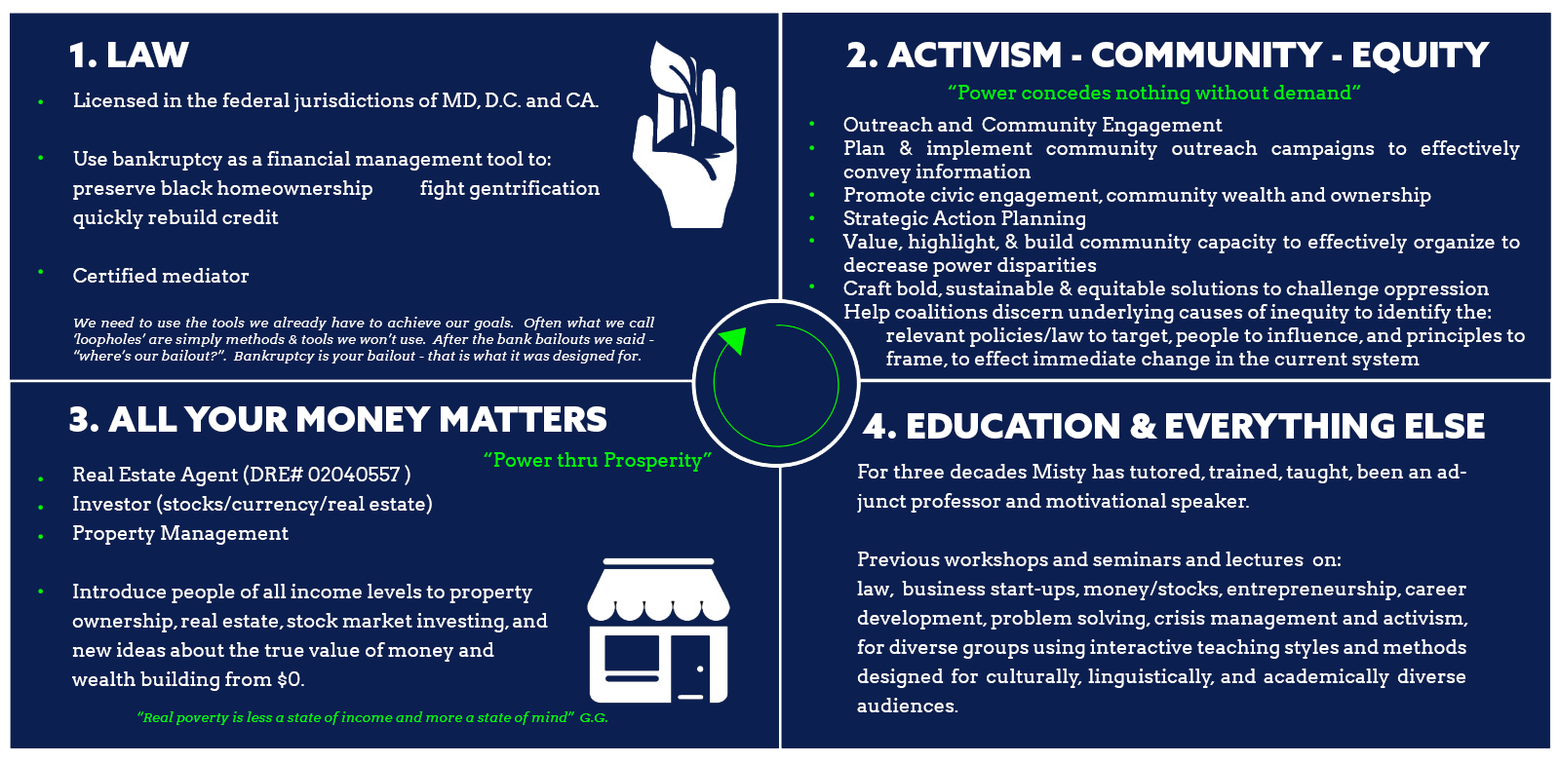
<style>
.page{position:relative;width:1560px;height:764px;background:#0b1f51}
.page>*{position:absolute;margin:0}
.t1{font:35.1px "AzoSans-Black";color:#ffffff}
.t2{font:19.5px "Arvo";color:#01f601}
.t3{font:13.6px "Arvo-Italic";color:#ffffff}
.t4{font:19.5px/29.2px "Arvo";color:#ffffff}
.t5{font:19.5px/23.4px "Arvo";color:#ffffff}
.t6{font:19.5px "Arvo";color:#00f800}
.t7{font:13.6px "Arvo-Italic";color:#06f804}
</style>
<div class="page">
<p class="t1" style="left:70px;top:42px;width:119px;height:25px">1. LAW</p>
<p class="t1" style="left:846px;top:42px;width:644px;height:32px">2. ACTIVISM - COMMUNITY - EQUITY</p>
<p class="t2" style="left:948px;top:85px;width:413px;height:19px">“Power concedes nothing without demand”</p>
<p class="t3" style="left:73px;top:93px;width:582px;height:271px;text-align:justify"><span class="t4">Licensed in the federal jurisdictions of MD, D.C. and CA. <br> <br>Use bankruptcy as a financial management tool to: <br>preserve black homeownership           fight gentrification<br>quickly rebuild credit<br><br>Certified mediator<br><br></span>We need to use the tools we already have to achieve our goals.  Often what we call ‘loopholes’ are simply methods &amp; tools we won’t use.  After the bank bailouts we said - “where’s our bailout?”.  Bankruptcy is your bailout - that is what it was designed for.</p>
<p class="t5" style="left:842px;top:117px;width:683px;height:253px;text-align:justify">Outreach and  Community Engagement<br>Plan &amp; implement community outreach campaigns to effectively convey information<br>Promote civic engagement, community wealth and ownership<br>Strategic Action Planning<br>Value, highlight, &amp; build community capacity to effectively organize to decrease power disparities <br>Craft bold, sustainable &amp; equitable solutions to challenge oppression<br>Help coalitions discern underlying causes of inequity to identify the:       <br>          relevant policies/law to target, people to influence, and principles to <br>          frame, to effect immediate change in the current system</p>
<p class="t1" style="left:69px;top:407px;width:537px;height:25px">3. ALL YOUR MONEY MATTERS</p>
<p class="t1" style="left:862px;top:413px;width:623px;height:26px">4. EDUCATION &amp; EVERYTHING ELSE</p>
<p class="t6" style="left:484px;top:452px;width:228px;height:20px">“Power thru Prosperity”</p>
<p class="t4" style="left:72px;top:465px;width:476px;height:226px;text-align:justify">Real Estate Agent (DRE# 02040557 )<br>Investor (stocks/currency/real estate)<br>Property Management <br> <br>Introduce people of all income levels to property <br>ownership, real estate, stock market investing, and <br>new ideas about the true value of money and <br>wealth building from $0.</p>
<p class="t4" style="left:857px;top:464px;width:611px;height:249px;text-align:justify">For three decades Misty has tutored, trained, taught, been an adjunct professor and motivational speaker.  <br><br>Previous workshops and seminars and lectures  on: <br>law,  business start-ups, money/stocks, entrepreneurship, career development, problem solving, crisis management and activism,  for diverse groups using interactive teaching styles and methods designed for culturally, linguistically, and academically diverse audiences.</p>
<p class="t7" style="left:137px;top:712px;width:470px;height:13px">“Real poverty is less a state of income and more a state of mind”  G.G.</p>
</div>
